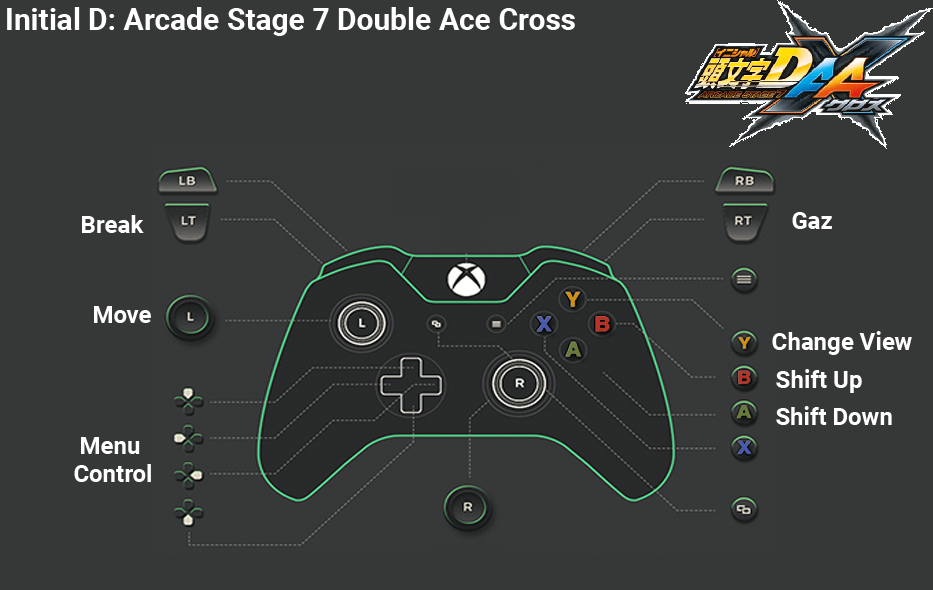
<style>
.page{position:relative;width:933px;height:590px;background:#363838}
.page>*{position:absolute;margin:0}
.t1{font:30px "Roboto-Bold";color:#ffffff}
.t2{font:24px "Roboto-Bold";color:#ffffff}
.t3{font:24px/28px "Roboto-Bold";color:#ffffff}
</style>
<div class="page">
<p class="t1" style="left:7px;top:7px;width:568px;height:29px">Initial D: Arcade Stage 7 Double Ace Cross</p>
<p class="t2" style="left:82px;top:215px;width:62px;height:18px">Break</p>
<p class="t2" style="left:792px;top:212px;width:40px;height:17px">Gaz</p>
<p class="t2" style="left:94px;top:306px;width:57px;height:17px">Move</p>
<p class="t2" style="left:772px;top:331px;width:140px;height:24px">Change View</p>
<p class="t2" style="left:776px;top:369px;width:86px;height:24px">Shift Up</p>
<p class="t2" style="left:776px;top:406px;width:116px;height:19px">Shift Down</p>
<p class="t3" style="left:74px;top:437px;width:77px;height:45px;text-align:center">Menu <br>Control</p>
</div>
